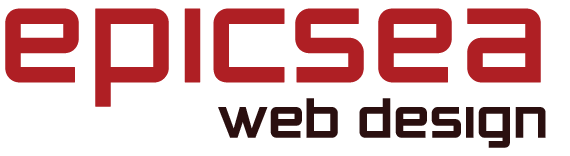
<style>
.page{position:relative;width:570px;height:156px;background:#ffffff}
.page>*{position:absolute;margin:0}
.t1{font:124.3px "ZeroThrees";color:#af1f24;font-weight:bold}
.t2{font:51px "ZeroThrees";color:#2a0f0f;font-weight:bold}
</style>
<div class="page">
<p class="t1" style="left:5px;top:8px;width:536px;height:99px">epicsea</p>
<p class="t2" style="left:218px;top:98px;width:328px;height:50px">web design</p>
</div>
